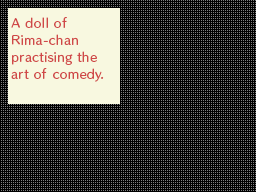
<style>
.page{position:relative;width:256px;height:192px;background:#000000}
.page>*{position:absolute;margin:0}
.t1{font:11.4px/17px "HummingStd-D";letter-spacing:0.04em;color:#d04848}
</style>
<div class="page">
<p class="t1" style="left:11px;top:17px;width:93px;height:65px">A doll of<br>Rima-chan<br>practising the<br>art of comedy.</p>
</div>
